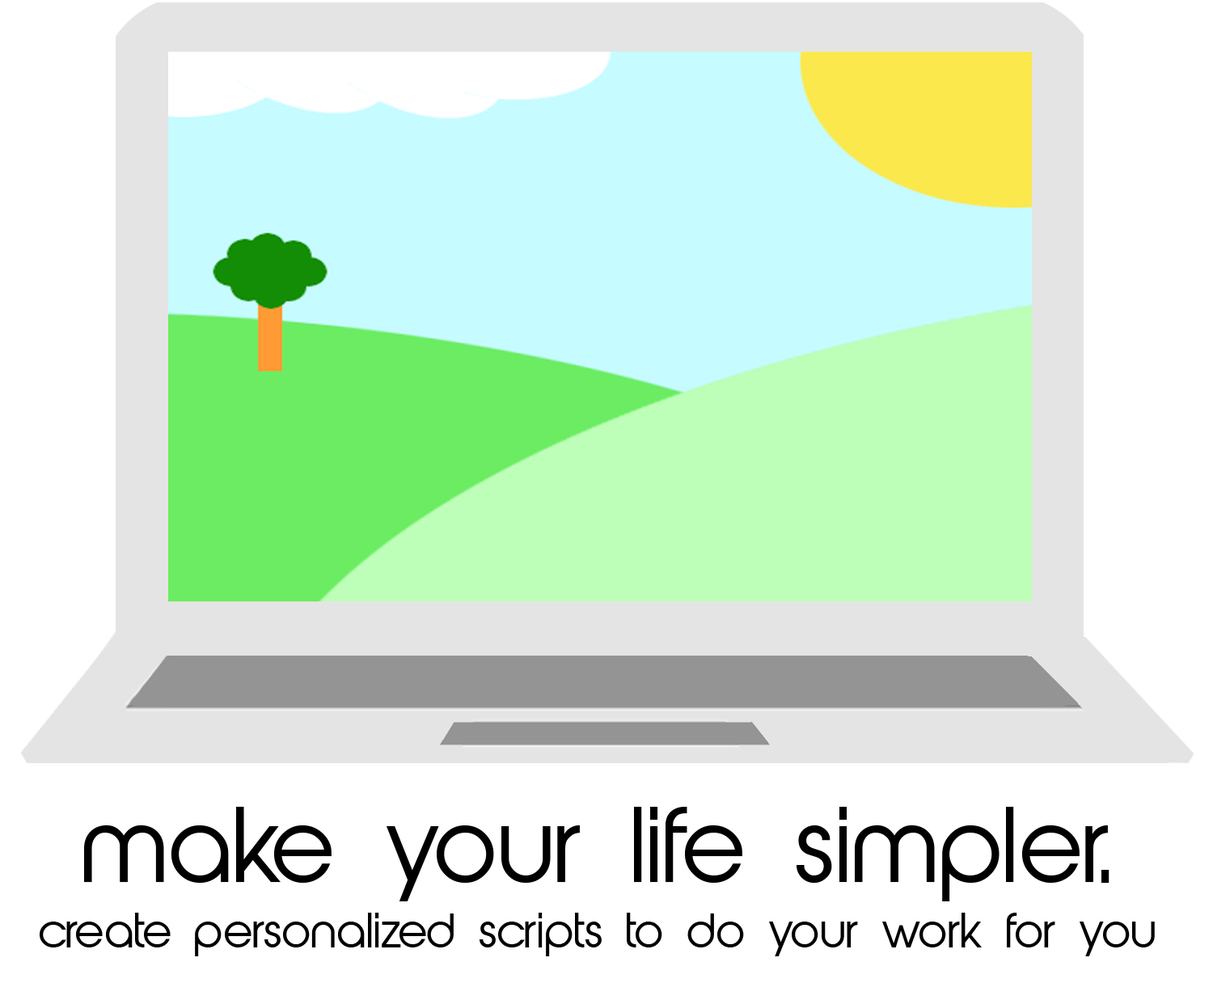
<style>
.page{position:relative;width:1213px;height:983px;background:#ffffff}
.page>*{position:absolute;margin:0}
.t1{font:97px "AbeatbyKai";color:#000000}
.t2{font:44.5px "AbeatbyKai";color:#000000}
</style>
<div class="page">
<p class="t1" style="left:84px;top:807px;width:1025px;height:95px">make your life simpler.</p>
<p class="t2" style="left:40px;top:913px;width:1115px;height:44px">create personalized scripts to do your work for you</p>
</div>
